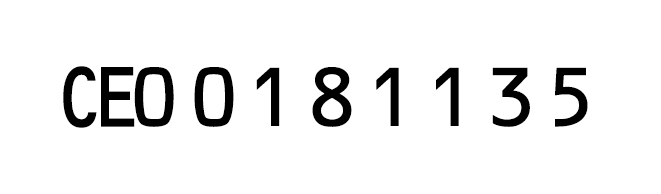
<style>
.page{position:relative;width:661px;height:194px;background:#ffffff}
.page>*{position:absolute;margin:0}
.t1{font:89.2px "OCRBEF-Regular";letter-spacing:-0.22em;color:#000000;scale:0.9 1}
.t2{font:80.8px "OCRBEF-Regular";letter-spacing:0.06em;color:#000000}
</style>
<div class="page">
<p class="t1" style="left:63px;top:66px;width:72px;height:62px">CE</p>
<p class="t2" style="left:134px;top:67px;width:454px;height:60px">00181135</p>
</div>
